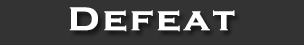
<style>
.page{position:relative;width:304px;height:45px;background:#333333}
.page>*{position:absolute;margin:0}
.t1{font:58.3px "CopperplateGothic-Bold";letter-spacing:0.05em;color:#ffffff;font-weight:bold;scale:1.12 1}
</style>
<div class="page">
<p class="t1" style="left:69px;top:7px;width:166px;height:25px">Defeat</p>
</div>
